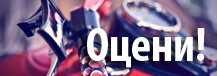
<style>
.page{position:relative;width:217px;height:76px}
.page>*{position:absolute;margin:0}
.t1{font:48px "MyriadPro-BoldCond";color:#ffffff}
</style>
<div class="page">
<p class="t1" style="left:87px;top:28px;width:118px;height:40px">Оцени!</p>
</div>
